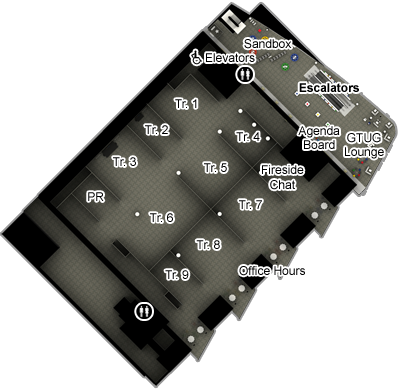
<style>
.page{position:relative;width:398px;height:390px;background:#ffffff}
.page>*{position:absolute;margin:0}
.t1{font:12px "ArialMT";color:#000000}
.t2{font:16px "Webdings";color:#000000}
.t3{font:12px "Arial-BoldMT";color:#000000}
</style>
<div class="page">
<p class="t1" style="left:244px;top:39px;width:48px;height:10px">Sandbox</p>
<p class="t1" style="left:191px;top:50px;width:64px;height:15px"><span class="t2">é</span>Elevators</p>
<p class="t3" style="left:299px;top:83px;width:60px;height:9px">Escalators</p>
<p class="t1" style="left:175px;top:99px;width:22px;height:9px">Tr. 1</p>
<p class="t1" style="left:145px;top:125px;width:23px;height:9px">Tr. 2</p>
<p class="t1" style="left:298px;top:126px;width:42px;height:23px;text-align:center">Agenda<br>Board</p>
<p class="t1" style="left:236px;top:132px;width:24px;height:9px">Tr. 4</p>
<p class="t1" style="left:345px;top:133px;width:39px;height:26px;text-align:center">GTUG<br>Lounge</p>
<p class="t1" style="left:113px;top:157px;width:23px;height:9px">Tr. 3</p>
<p class="t1" style="left:204px;top:163px;width:23px;height:9px">Tr. 5</p>
<p class="t1" style="left:262px;top:165px;width:42px;height:25px;text-align:center">Fireside<br>Chat</p>
<p class="t1" style="left:88px;top:192px;width:16px;height:9px">PR</p>
<p class="t1" style="left:239px;top:200px;width:23px;height:9px">Tr. 7</p>
<p class="t1" style="left:150px;top:213px;width:23px;height:9px">Tr. 6</p>
<p class="t1" style="left:196px;top:240px;width:24px;height:9px">Tr. 8</p>
<p class="t1" style="left:165px;top:270px;width:24px;height:9px">Tr. 9</p>
<p class="t1" style="left:239px;top:266px;width:66px;height:10px">Office Hours</p>
</div>
